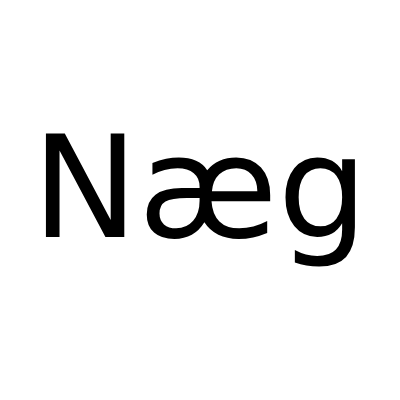
<style>
.page{position:relative;width:400px;height:400px;background:#ffffff}
.page>*{position:absolute;margin:0}
.t1{font:142px "DejaVuSans";color:#000000}
</style>
<div class="page">
<p class="t1" style="left:45px;top:133px;width:310px;height:134px">Næg</p>
</div>
